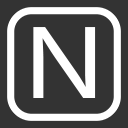
<style>
.page{position:relative;width:128px;height:128px;background:#333333}
.page>*{position:absolute;margin:0}
.t1{font:97.4px "Inter-Regular";letter-spacing:0.02em;color:#ffffff;text-transform:uppercase;scale:1.1 1}
</style>
<div class="page">
<p class="t1" style="left:33px;top:27px;width:63px;height:71px">n</p>
</div>
